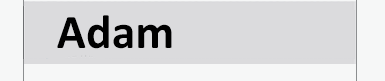
<style>
.page{position:relative;width:385px;height:81px;background:#dbdbdd}
.page>*{position:absolute;margin:0}
.t1{font:48px "Calibri-Bold";color:#000000}
</style>
<div class="page">
<p class="t1" style="left:57px;top:15px;width:115px;height:34px">Adam</p>
</div>
